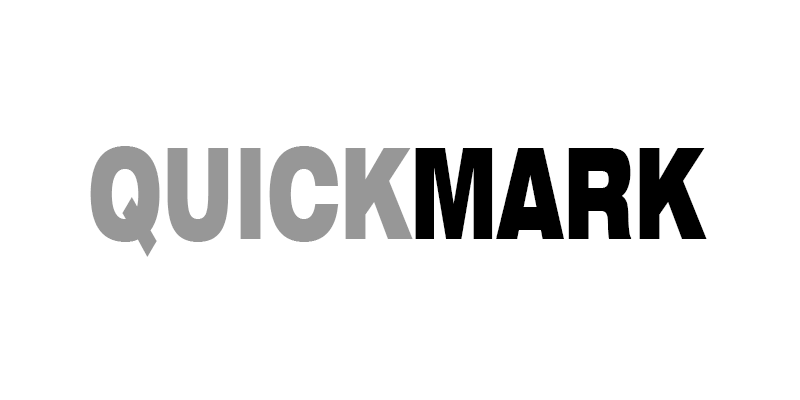
<style>
.page{position:relative;width:800px;height:400px;background:#ffffff}
.page>*{position:absolute;margin:0}
.t1{font:125.4px "Swiss721BT-BlackExtended";letter-spacing:0.01em;color:#979797;scale:0.57 1}
.t2{font:125.4px "Swiss721BT-BlackExtended";letter-spacing:0.01em;color:#000000;scale:0.57 1}
</style>
<div class="page">
<p class="t1" style="left:90px;top:146px;width:617px;height:111px">QUICK<span class="t2">MARK</span></p>
</div>
